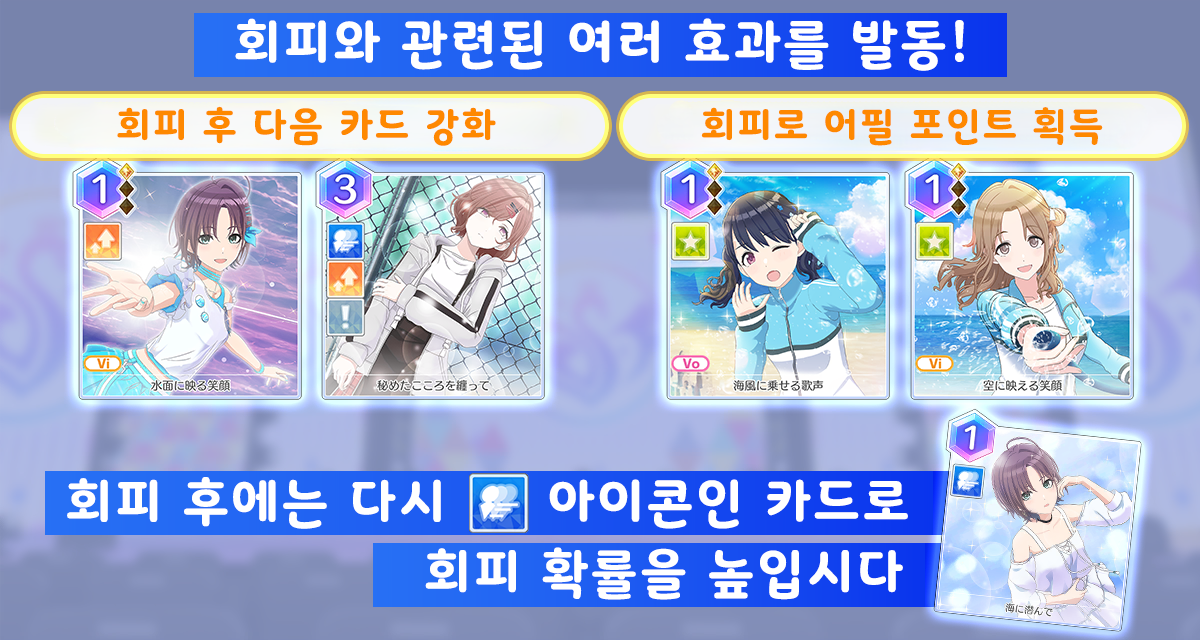
<style>
.page{position:relative;width:1200px;height:640px}
.page>*{position:absolute;margin:0}
.t1{font:50.7px "Binggrae-Bold";letter-spacing:0.05em;color:#ffffff;text-transform:uppercase;scale:0.95 1}
.t2{font:37.3px "Binggrae-Bold";letter-spacing:0.05em;color:#fe8800;text-transform:uppercase;scale:0.95 1}
</style>
<div class="page">
<p class="t1" style="left:235px;top:18px;width:729px;height:53px">회피와 관련된 여러 효과를 발동!</p>
<p class="t2" style="left:117px;top:106px;width:379px;height:40px">회피 후 다음 카드 강화</p>
<p class="t2" style="left:701px;top:107px;width:402px;height:39px">회피로 어필 포인트 획득</p>
<p class="t1" style="left:67px;top:477px;width:374px;height:52px">회피 후에는 다시</p>
<p class="t1" style="left:549px;top:479px;width:359px;height:50px">아이콘인 카드로</p>
<p class="t1" style="left:425px;top:547px;width:478px;height:53px">회피 확률을 높입시다</p>
</div>
